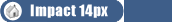
<style>
.page{position:relative;width:172px;height:22px;background:#3e5e89}
.page>*{position:absolute;margin:0}
.t1{font:15px "Impact";color:#ffffff}
</style>
<div class="page">
<p class="t1" style="left:30px;top:4px;width:78px;height:14px">Impact 14px</p>
</div>
